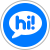
<style>
.page{position:relative;width:50px;height:50px;background:#ffffff}
.page>*{position:absolute;margin:0}
.t1{font:20.8px "PicoBlack";letter-spacing:-0.01em;color:#007aff}
</style>
<div class="page">
<p class="t1" style="left:15px;top:15px;width:20px;height:15px">hi!</p>
</div>
